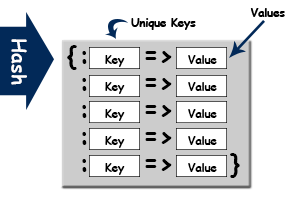
<style>
.page{position:relative;width:290px;height:200px;background:#ffffff}
.page>*{position:absolute;margin:0}
.t1{font:11.7px "ComicSansMS-Bold";letter-spacing:-0.025em;color:#000000}
.t2{font:19.5px "ComicSansMS-Bold";color:#fffefe}
.t3{font:26px "ComicSansMS-Bold";letter-spacing:-0.025em;color:#000000}
</style>
<div class="page">
<p class="t1" style="left:250px;top:8px;width:35px;height:9px">Values</p>
<p class="t1" style="left:131px;top:18px;width:65px;height:12px">Unique Keys</p>
<p class="t2" style="left:11px;top:39px;width:16px;height:46px;rotate:90deg">Hash</p>
<p class="t3" style="left:67px;top:45px;width:10px;height:25px">{</p>
<p class="t1" style="left:82px;top:51px;width:135px;height:16px"><span class="t3"> :  </span>Key    <span class="t3">=&gt;</span>   Value</p>
<p class="t1" style="left:82px;top:78px;width:135px;height:16px"><span class="t3"> :  </span>Key    <span class="t3">=&gt;</span>   Value</p>
<p class="t1" style="left:82px;top:105px;width:135px;height:16px"><span class="t3"> :  </span>Key    <span class="t3">=&gt;</span>   Value</p>
<p class="t1" style="left:82px;top:132px;width:135px;height:16px"><span class="t3"> :  </span>Key    <span class="t3">=&gt;</span>   Value</p>
<p class="t1" style="left:82px;top:159px;width:135px;height:16px"><span class="t3"> :  </span>Key    <span class="t3">=&gt;</span>   Value</p>
<p class="t3" style="left:230px;top:153px;width:10px;height:25px">}</p>
</div>
